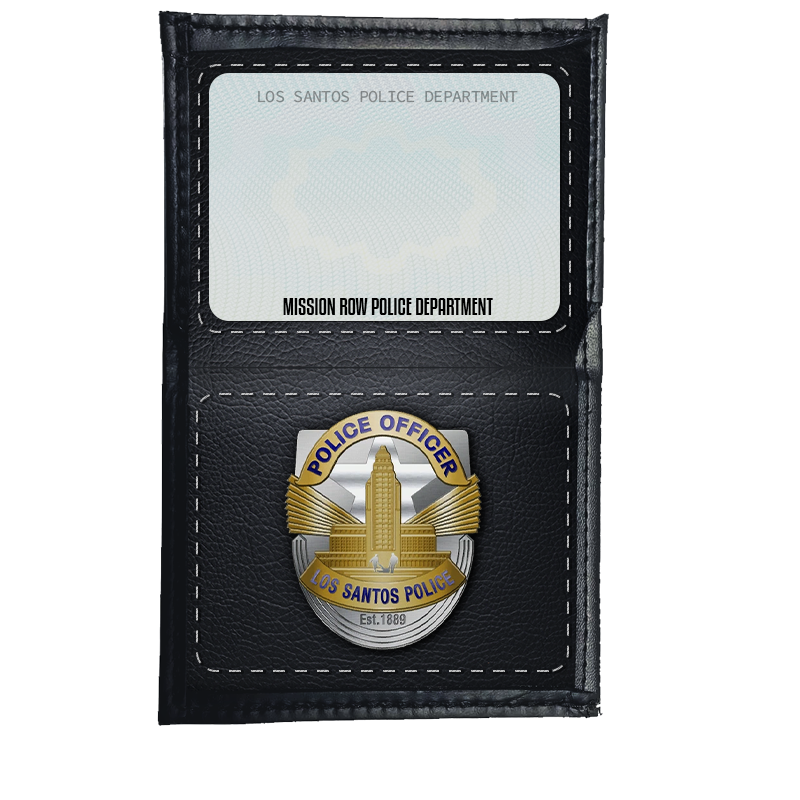
<style>
.page{position:relative;width:800px;height:800px;background:#ffffff}
.page>*{position:absolute;margin:0}
.t1{font:16.7px "SourceCodeVariable-Roman";letter-spacing:-0.04em;color:#82898a}
.t2{font:20.6px "KenyanCoffeeRg-Regular";color:#000000}
</style>
<div class="page">
<p class="t1" style="left:258px;top:90px;width:260px;height:13px">LOS SANTOS POLICE DEPARTMENT</p>
<p class="t2" style="left:283px;top:298px;width:210px;height:17px">MISSION ROW POLICE DEPARTMENT</p>
</div>
